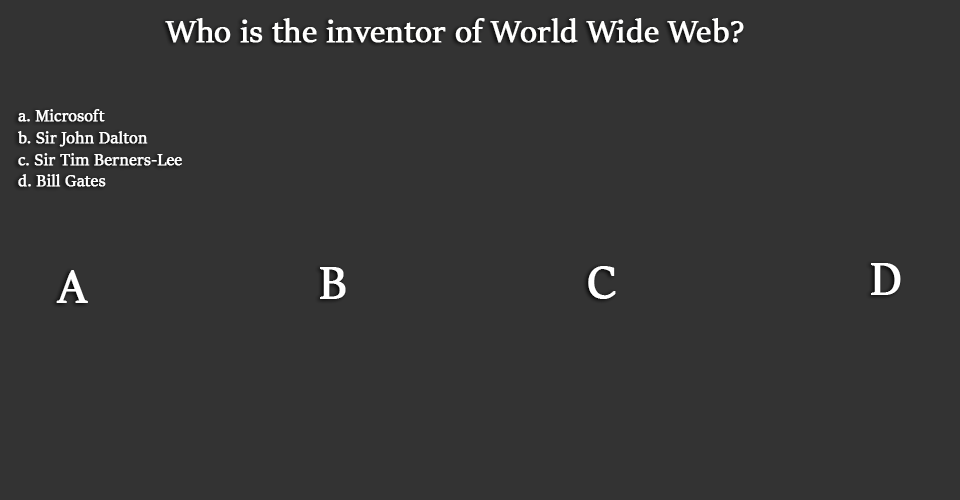
<style>
.page{position:relative;width:960px;height:500px;background:#333333}
.page>*{position:absolute;margin:0}
.t1{font:35px "SitkaBanner";color:#fffffe;font-weight:bold}
.t2{font:18px "SitkaBanner";color:#ffffff;font-weight:bold}
.t3{font:50px "SitkaBanner";color:#ffffff;font-weight:bold}
</style>
<div class="page">
<p class="t1" style="left:165px;top:18px;width:579px;height:25px">Who is the inventor of World Wide Web?</p>
<p class="t2" style="left:18px;top:109px;width:164px;height:78px">a. Microsoft <br> b. Sir John Dalton<br> c. Sir Tim Berners-Lee<br> d. Bill Gates</p>
<p class="t3" style="left:56px;top:270px;width:32px;height:33px">A</p>
<p class="t3" style="left:320px;top:267px;width:26px;height:32px">B</p>
<p class="t3" style="left:588px;top:266px;width:28px;height:33px">C</p>
<p class="t3" style="left:871px;top:263px;width:30px;height:32px">D</p>
</div>
